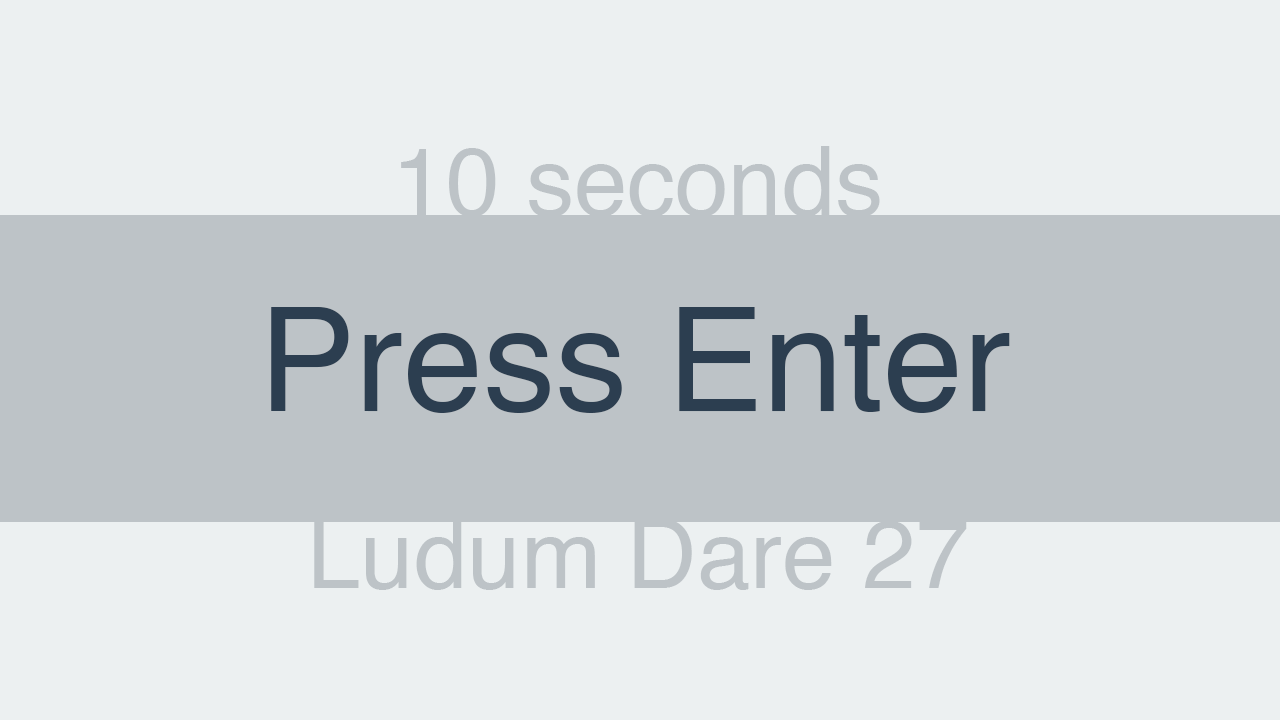
<style>
.page{position:relative;width:1280px;height:720px;background:#ecf0f1}
.page>*{position:absolute;margin:0}
.t1{font:96px "Helvetica";color:#bdc3c7}
.t2{font:144px "Helvetica";color:#2c3e50}
.t3{font:96.3px "Helvetica";color:#bdc3c7}
</style>
<div class="page">
<p class="t1" style="left:401px;top:146px;width:479px;height:71px">10 seconds</p>
<p class="t2" style="left:271px;top:307px;width:739px;height:106px">Press Enter</p>
<p class="t3" style="left:314px;top:519px;width:653px;height:71px">Ludum Dare 27</p>
</div>
